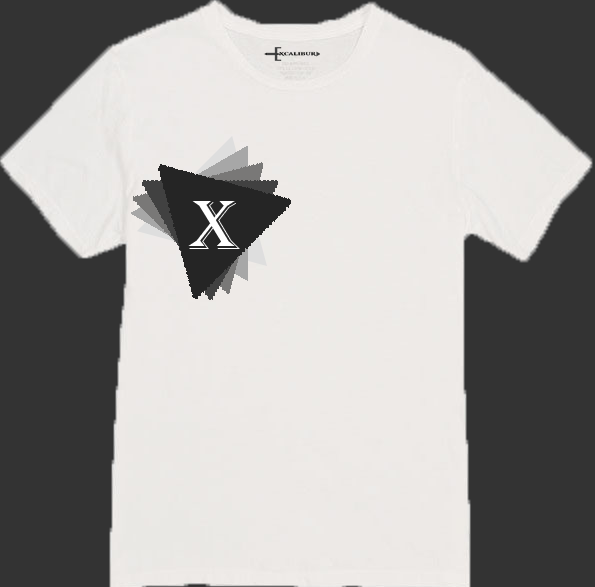
<style>
.page{position:relative;width:595px;height:587px;background:#333333}
.page>*{position:absolute;margin:0}
.t1{font:72px "Algerian";color:#ffffff}
</style>
<div class="page">
<p class="t1" style="left:188px;top:201px;width:52px;height:48px">X</p>
</div>
